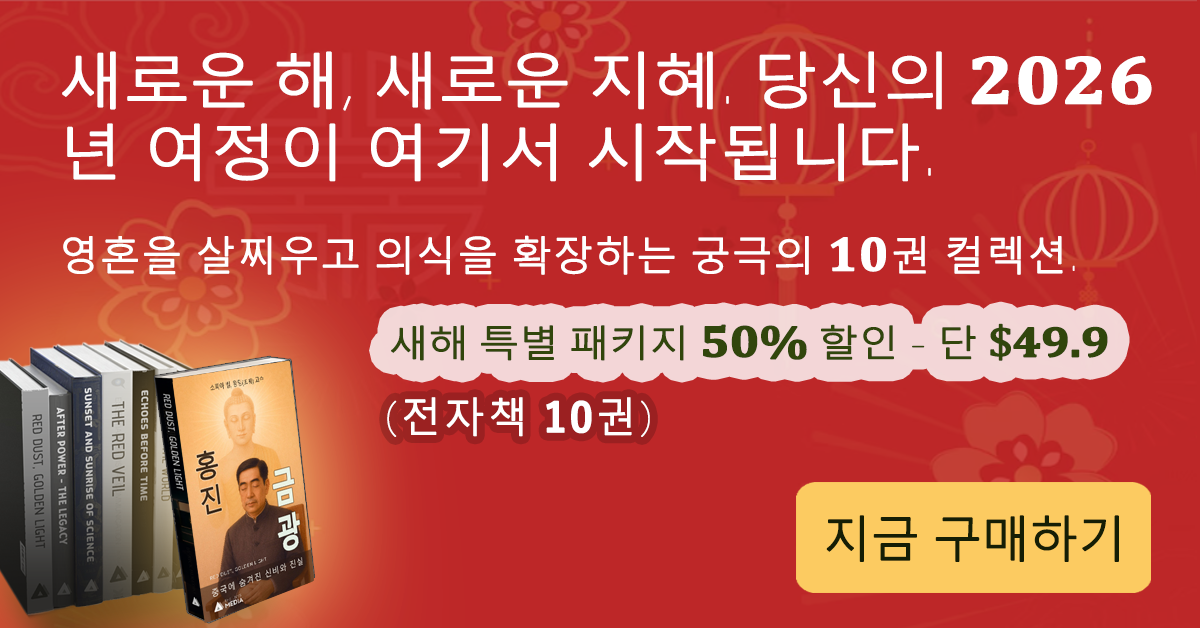
<style>
.page{position:relative;width:1200px;height:628px;background:#bd2728}
.page>*{position:absolute;margin:0}
.t1{font:59.4px/72px "MalgunGothic-Semilight";letter-spacing:-0.005em;color:#ffffff;font-weight:bold;scale:1.11 1}
.t2{font:59.4px/72px "MalgunGothic-Semilight";letter-spacing:-0.025em;color:#ffffff;font-weight:bold;scale:1.11 1}
.t3{font:59.4px/72px "Chogokuboso-Gothic";letter-spacing:-0.025em;color:#ffffff;font-weight:bold;scale:1.11 1}
.t4{font:68.4px/72px "Cambria-Bold";letter-spacing:-0.005em;color:#ffffff;font-weight:bold;scale:1.11 1}
.t5{font:59.4px/72px "Chogokuboso-Gothic";letter-spacing:-0.005em;color:#ffffff;font-weight:bold;scale:1.11 1}
.t6{font:39.6px "MalgunGothic-Semilight";letter-spacing:0.025em;color:#ffffff;font-weight:bold}
.t7{font:48.6px "Cambria-Bold";letter-spacing:0.025em;color:#ffffff;font-weight:bold}
.t8{font:39.6px "Chogokuboso-Gothic";letter-spacing:0.025em;color:#ffffff;font-weight:bold}
.t9{font:36px "MalgunGothic-Semilight";letter-spacing:-0.025em;color:#31460c;font-weight:bold;scale:1.11 1}
.t10{font:45px "Cambria-Bold";letter-spacing:-0.025em;color:#31460c;font-weight:bold;scale:1.11 1}
.t11{font:36px "Chogokuboso-Gothic";letter-spacing:-0.025em;color:#31460c;font-weight:bold;scale:1.11 1}
.t12{font:43.2px "Cambria";letter-spacing:-0.025em;color:#31460c;font-weight:bold;scale:1.11 1}
.t13{font:43.2px "Cambria-Bold";letter-spacing:-0.025em;color:#31460c;font-weight:bold;scale:1.11 1}
.t14{font:40px "MalgunGothic-Semilight";letter-spacing:0.05em;color:#ffffff;font-weight:bold}
.t15{font:40px "Chogokuboso-Gothic";letter-spacing:0.05em;color:#ffffff;font-weight:bold}
.t16{font:40px "YuGothic-Bold";letter-spacing:0.05em;color:#ffffff;font-weight:bold}
.t17{font:48px "MalgunGothic-Semilight";letter-spacing:-0.025em;color:#151e05;font-weight:bold}
</style>
<div class="page">
<p class="t1" style="left:62px;top:51px;width:1090px;height:131px"><span class="t2">새로운 해</span><span class="t3">, </span><span class="t2">새로운 지혜</span><span class="t3">. </span><span class="t2">당신의 </span><span class="t4">2026</span>년 여정이 여기서 시작됩니다<span class="t5">.</span></p>
<p class="t6" style="left:63px;top:235px;width:1012px;height:40px">영혼을 살찌우고 의식을 확장하는 궁극의 <span class="t7">10</span>권 컬렉션<span class="t8">.</span></p>
<p class="t9" style="left:391px;top:323px;width:717px;height:38px">새해 특별 패키지 <span class="t10">50% </span>할인<span class="t11"> - </span>단<span class="t12"> $</span><span class="t13">49.9</span></p>
<p class="t14" style="left:387px;top:397px;width:263px;height:40px"><span class="t15">(</span>전자책 <span class="t16">10</span>권<span class="t15">)</span></p>
<p class="t17" style="left:826px;top:515px;width:293px;height:47px">지금 구매하기</p>
</div>
